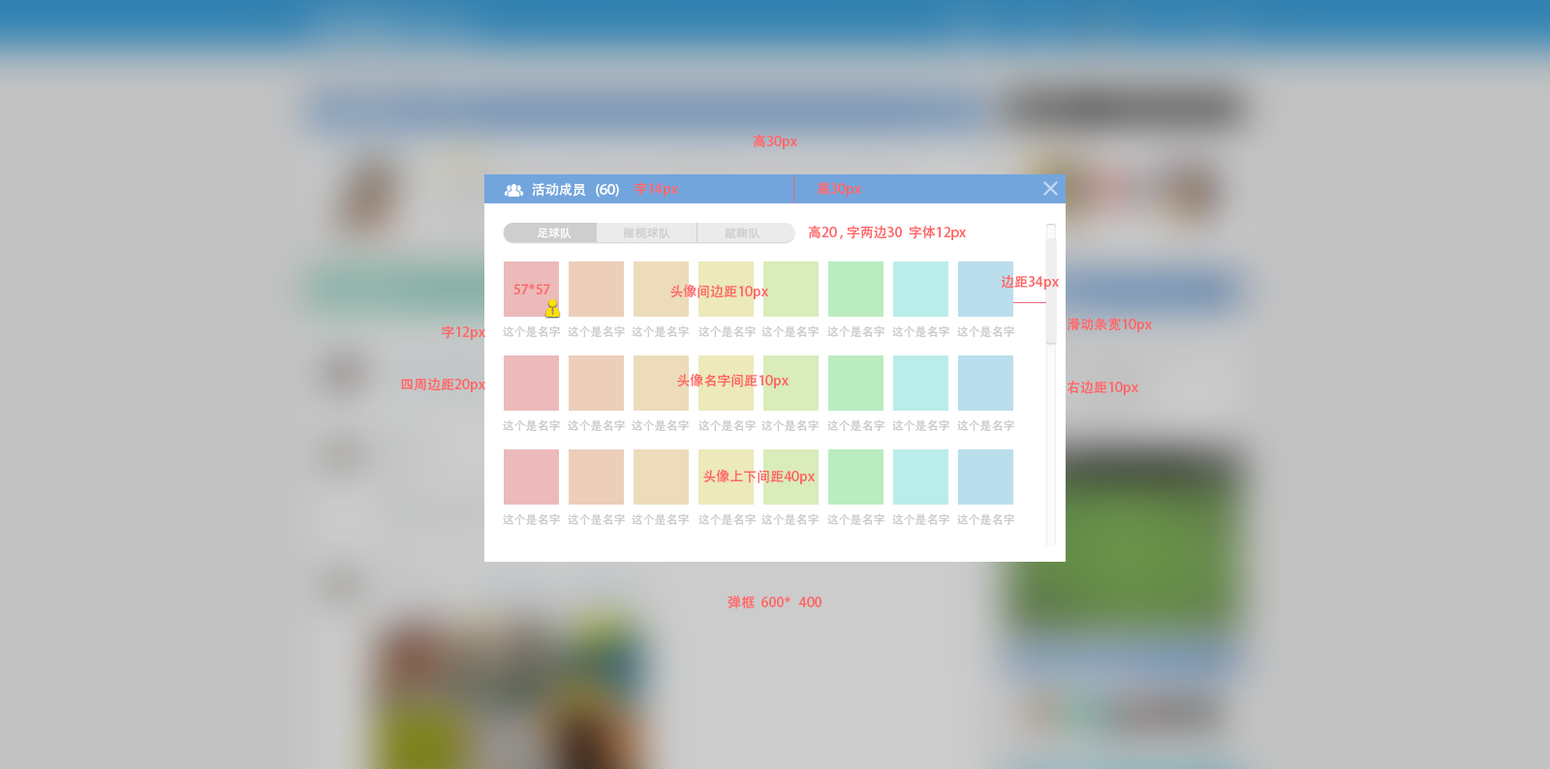
<style>
.page{position:relative;width:1550px;height:769px;background:#c2c2c2}
.page>*{position:absolute;margin:0}
.t1{font:13.6px "AdobeHeitiStd-Regular";color:#ff6666}
.t2{font:13.6px "AdobeHeitiStd-Regular";color:#ffffff}
.t3{font:11.6px "AdobeHeitiStd-Regular";color:#cccccc}
</style>
<div class="page">
<p class="t1" style="left:753px;top:135px;width:44px;height:14px">高30px</p>
<p class="t2" style="left:532px;top:183px;width:87px;height:14px">活动成员   (60)</p>
<p class="t1" style="left:635px;top:182px;width:43px;height:15px">字14px</p>
<p class="t1" style="left:817px;top:182px;width:44px;height:15px">高30px</p>
<p class="t1" style="left:808px;top:226px;width:158px;height:14px">高20 , 字两边30  字体12px</p>
<p class="t1" style="left:1001px;top:275px;width:58px;height:15px">边距34px</p>
<p class="t1" style="left:513px;top:284px;width:37px;height:11px">57*57</p>
<p class="t1" style="left:670px;top:284px;width:98px;height:15px">头像间边距10px</p>
<p class="t1" style="left:1067px;top:318px;width:85px;height:14px">滑动条宽10px</p>
<p class="t1" style="left:442px;top:326px;width:43px;height:14px">字12px</p>
<p class="t3" style="left:503px;top:326px;width:57px;height:12px">这个是名字</p>
<p class="t3" style="left:568px;top:326px;width:57px;height:12px">这个是名字</p>
<p class="t3" style="left:632px;top:326px;width:57px;height:12px">这个是名字</p>
<p class="t3" style="left:699px;top:326px;width:57px;height:12px">这个是名字</p>
<p class="t3" style="left:761px;top:326px;width:58px;height:12px">这个是名字</p>
<p class="t3" style="left:827px;top:326px;width:58px;height:12px">这个是名字</p>
<p class="t3" style="left:892px;top:326px;width:57px;height:12px">这个是名字</p>
<p class="t3" style="left:957px;top:326px;width:57px;height:12px">这个是名字</p>
<p class="t1" style="left:401px;top:378px;width:84px;height:14px">四周边距20px</p>
<p class="t1" style="left:677px;top:373px;width:112px;height:16px">头像名字间距10px</p>
<p class="t1" style="left:1067px;top:380px;width:71px;height:15px">右边距10px</p>
<p class="t3" style="left:503px;top:420px;width:57px;height:12px">这个是名字</p>
<p class="t3" style="left:568px;top:420px;width:57px;height:12px">这个是名字</p>
<p class="t3" style="left:632px;top:420px;width:57px;height:12px">这个是名字</p>
<p class="t3" style="left:699px;top:420px;width:57px;height:12px">这个是名字</p>
<p class="t3" style="left:761px;top:420px;width:58px;height:12px">这个是名字</p>
<p class="t3" style="left:827px;top:420px;width:58px;height:12px">这个是名字</p>
<p class="t3" style="left:892px;top:420px;width:57px;height:12px">这个是名字</p>
<p class="t3" style="left:957px;top:420px;width:57px;height:12px">这个是名字</p>
<p class="t1" style="left:703px;top:469px;width:112px;height:15px">头像上下间距40px</p>
<p class="t3" style="left:503px;top:513px;width:57px;height:13px">这个是名字</p>
<p class="t3" style="left:568px;top:513px;width:57px;height:13px">这个是名字</p>
<p class="t3" style="left:632px;top:513px;width:57px;height:13px">这个是名字</p>
<p class="t3" style="left:699px;top:513px;width:57px;height:13px">这个是名字</p>
<p class="t3" style="left:761px;top:513px;width:58px;height:13px">这个是名字</p>
<p class="t3" style="left:827px;top:513px;width:58px;height:13px">这个是名字</p>
<p class="t3" style="left:892px;top:513px;width:57px;height:13px">这个是名字</p>
<p class="t3" style="left:957px;top:513px;width:57px;height:13px">这个是名字</p>
<p class="t1" style="left:728px;top:596px;width:94px;height:13px">弹框  600*   400</p>
</div>
